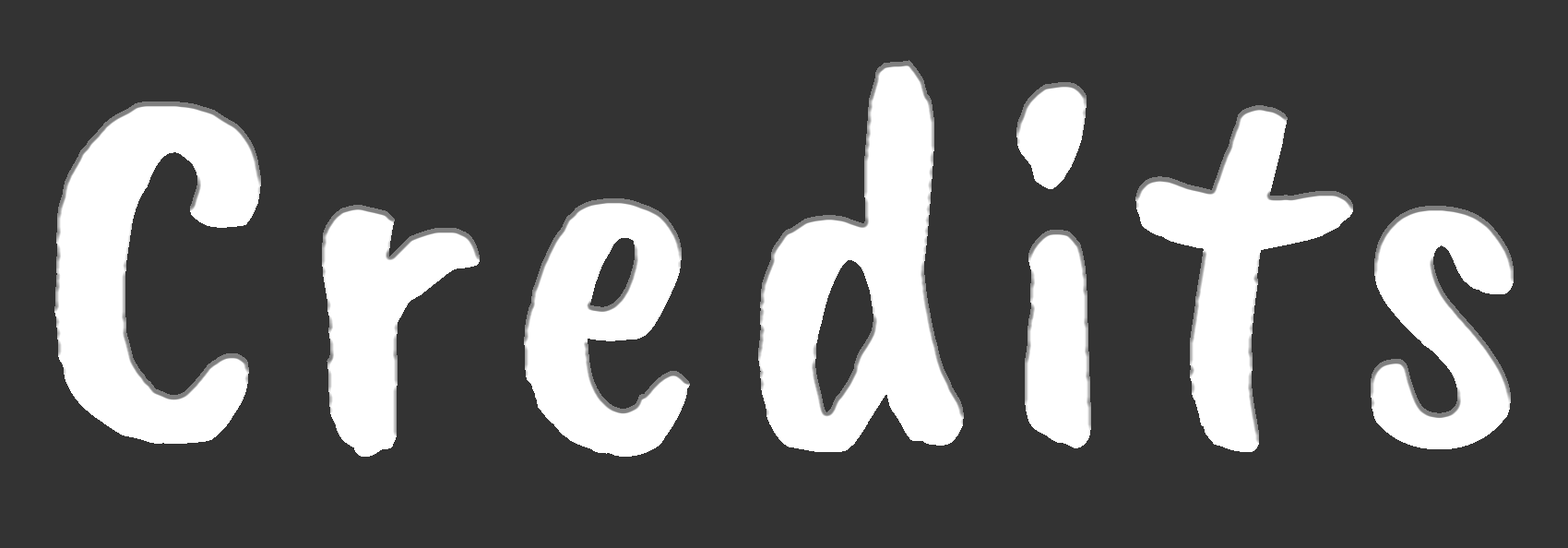
<style>
.page{position:relative;width:1568px;height:548px;background:#333333}
.page>*{position:absolute;margin:0}
.t1{font:540.9px "CaveatBrush-Regular";letter-spacing:0.04em;color:#ffffff}
</style>
<div class="page">
<p class="t1" style="left:54px;top:60px;width:1460px;height:397px">Credits</p>
</div>
